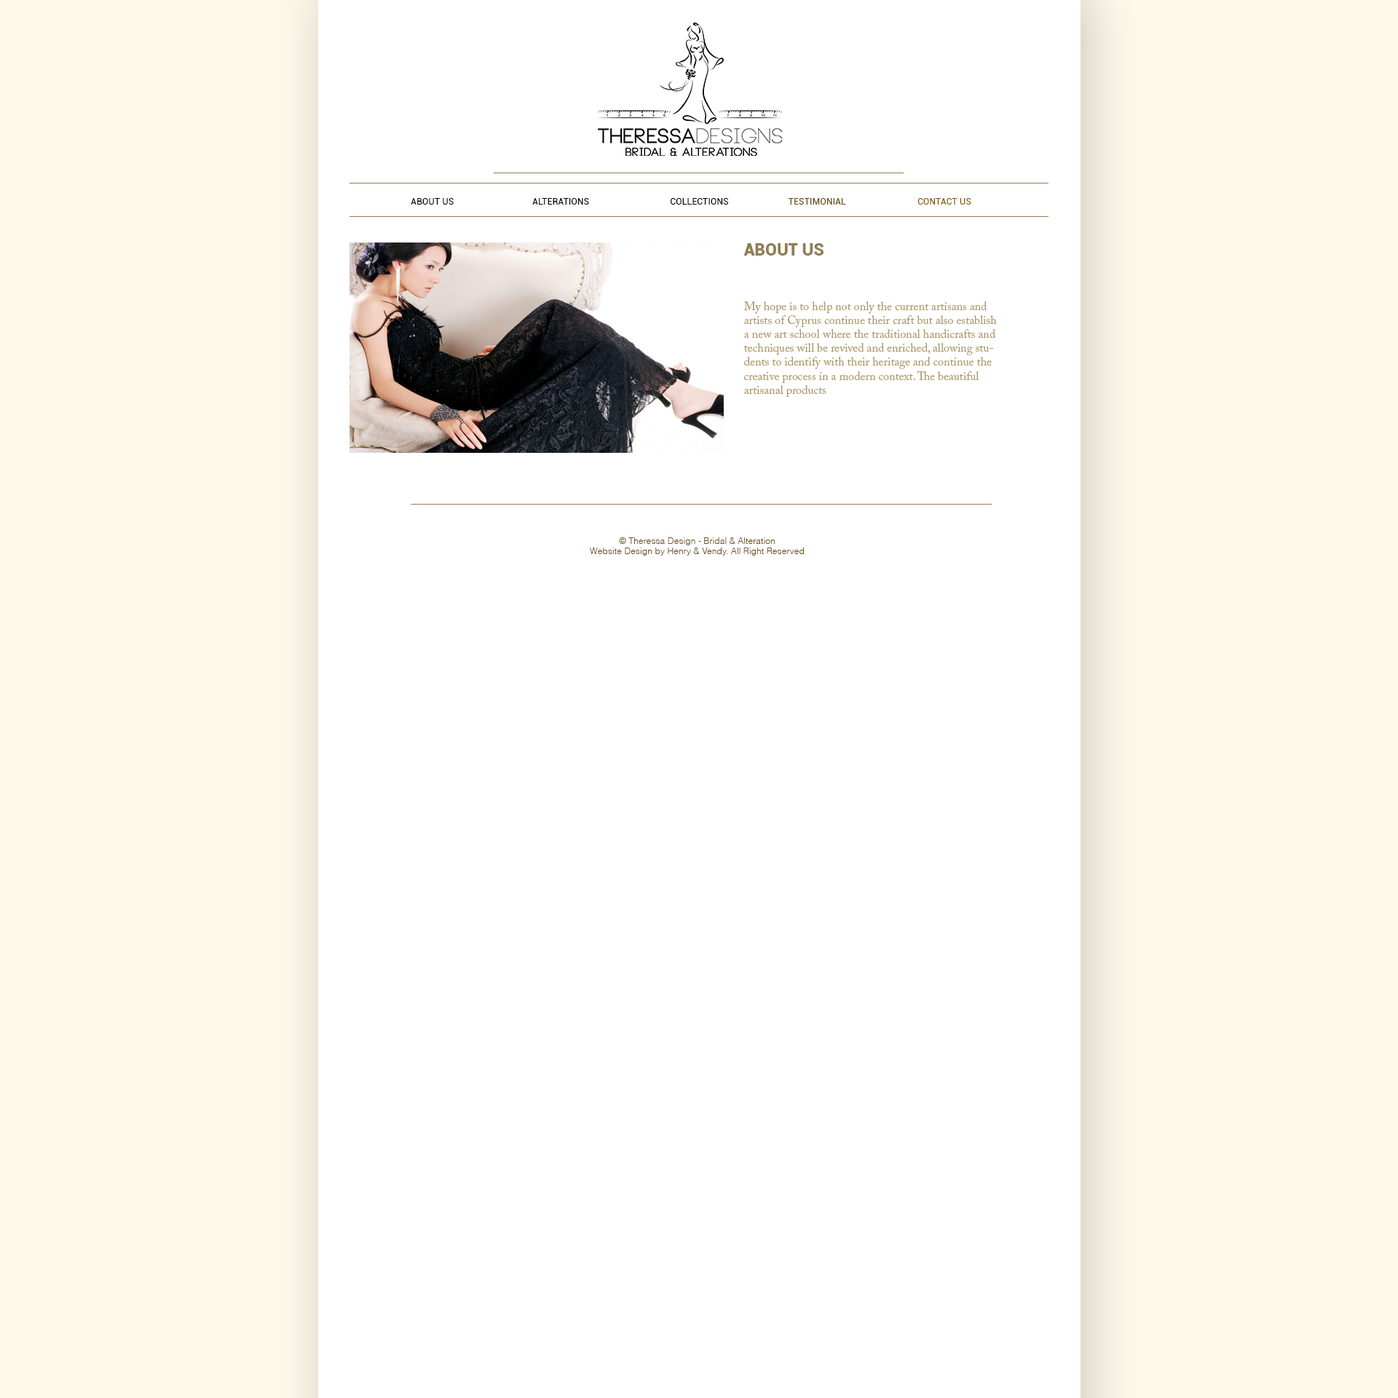
<style>
.page{position:relative;width:1398px;height:1398px;background:#ffffff}
.page>*{position:absolute;margin:0}
.t1{font:9px "Roboto-Regular";color:#000000}
.t2{font:9px "Roboto-Regular";color:#654b13}
.t3{font:9px "Roboto-Regular";color:#835e00}
.t4{font:16.7px "Roboto-Black";color:#917d56}
.t5{font:11.6px "ACaslonPro-Regular";color:#ad9766}
.t6{font:8.9px "Helvetica-Light";color:#6e5320}
</style>
<div class="page">
<p class="t1" style="left:411px;top:198px;width:43px;height:7px">ABOUT US</p>
<p class="t1" style="left:532px;top:198px;width:57px;height:7px">ALTERATIONS</p>
<p class="t1" style="left:671px;top:198px;width:58px;height:7px">COLLECTIONS</p>
<p class="t2" style="left:788px;top:198px;width:58px;height:7px">TESTIMONIAL</p>
<p class="t3" style="left:917px;top:198px;width:54px;height:7px">CONTACT US</p>
<p class="t4" style="left:743px;top:243px;width:80px;height:13px">ABOUT US</p>
<p class="t5" style="left:744px;top:301px;width:253px;height:96px">My hope is to help not only the current artisans and artists of Cyprus continue their craft but also establish a new art school where the traditional handicrafts and techniques will be revived and enriched, allowing students to identify with their heritage and continue the creative process in a modern context. The beautiful artisanal products</p>
<p class="t6" style="left:590px;top:537px;width:214px;height:18px;text-align:center">© Theressa Design - Bridal &amp; Alteration<br>Website Design by Henry &amp; Vendy. All Right Reserved</p>
</div>
